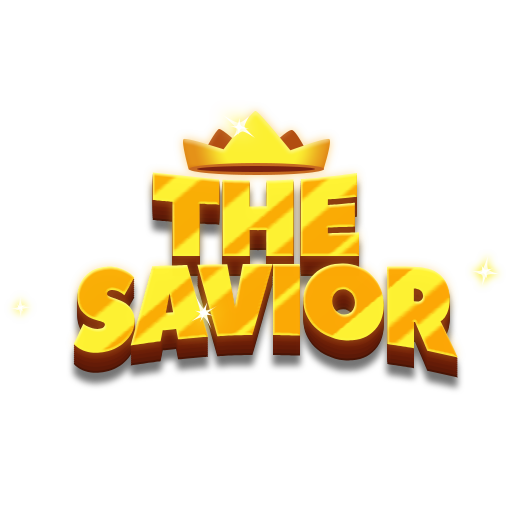
<style>
.page{position:relative;width:512px;height:512px;background:#ffffff}
.page>*{position:absolute;margin:0}
.t1{font:119.8px "PeaceSans";letter-spacing:-0.05em;scale:0.87 1}
.t2{font:123.6px "PeaceSans";letter-spacing:-0.067em;scale:0.83 1}
</style>
<div class="page">
<p class="t1" style="left:152px;top:172px;width:208px;height:84px">THE</p>
<p class="t2" style="left:73px;top:263px;width:385px;height:95px">SAVIOR</p>
</div>
